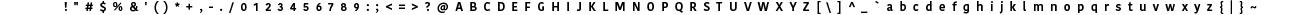
<style>
.page{position:relative;width:1300px;height:15px;background:#ffffff}
.page>*{position:absolute;margin:0}
.t1{font:12px "KohinoorDevanagari-Medium";letter-spacing:0.54em;color:#000000}
</style>
<div class="page">
<p class="t1" style="left:64px;top:0px;width:1193px;height:14px">!"#$%&amp;'()*+,-./0123456789:;&lt;=&gt;?@ABCDEFGHIJKLMNOPQRSTUVWXYZ[\]^_`abcdefghijklmnopqrstuvwxyz{|}~</p>
</div>
